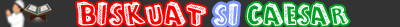
<style>
.page{position:relative;width:400px;height:27px;background:#333333}
.page>*{position:absolute;margin:0}
.t1{font:32px "FromCartoonBlocks";color:#ffffff;text-transform:uppercase}
.t2{font:30px "FromCartoonBlocks";color:#ffffff;text-transform:uppercase}
.t3{font:18px "ChallengeContour";color:#ffffff;text-transform:uppercase}
</style>
<div class="page">
<p class="t1" style="left:77px;top:1px;width:129px;height:25px">BISKUAT</p>
<p class="t2" style="left:214px;top:3px;width:25px;height:23px"><span class="t3"> </span>SI</p>
<p class="t2" style="left:246px;top:3px;width:103px;height:23px">CAESAR</p>
</div>
